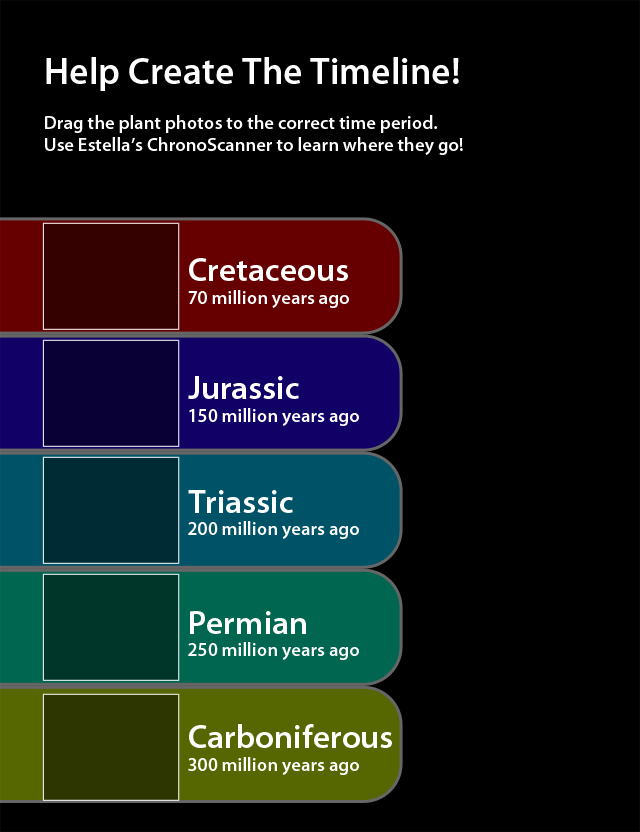
<style>
.page{position:relative;width:640px;height:832px;background:#000000}
.page>*{position:absolute;margin:0}
.t1{font:18.8px "MyriadPro-Semibold";color:#ffffff}
.t2{font:37.5px "MyriadPro-Semibold";color:#ffffff}
.t3{font:18.7px "MyriadPro-Semibold";color:#ffffff}
.t4{font:33.3px "MyriadPro-Semibold";color:#ffffff}
</style>
<div class="page">
<p class="t1" style="left:45px;top:57px;width:418px;height:98px"><span class="t2">Help Create The Timeline!<br></span><br>Drag the plant photos to the correct time period.<br>Use Estella’s ChronoScanner to learn where they go!</p>
<p class="t3" style="left:188px;top:258px;width:161px;height:50px"><span class="t4">Cretaceous<br></span>70 million years ago</p>
<p class="t3" style="left:188px;top:376px;width:171px;height:50px"><span class="t4">Jurassic<br></span>150 million years ago</p>
<p class="t3" style="left:188px;top:490px;width:171px;height:49px"><span class="t4">Triassic<br></span>200 million years ago</p>
<p class="t3" style="left:188px;top:611px;width:171px;height:49px"><span class="t4">Permian<br></span>250 million years ago</p>
<p class="t3" style="left:188px;top:724px;width:204px;height:51px"><span class="t4">Carboniferous<br></span>300 million years ago</p>
</div>
